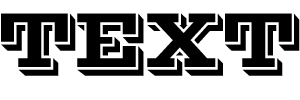
<style>
.page{position:relative;width:300px;height:100px;background:#ffffff}
.page>*{position:absolute;margin:0}
.t1{font:79.7px "VinetaBT-Regular";color:#000000;scale:0.85 1}
</style>
<div class="page">
<p class="t1" style="left:1px;top:13px;width:299px;height:63px">TEXT</p>
</div>
